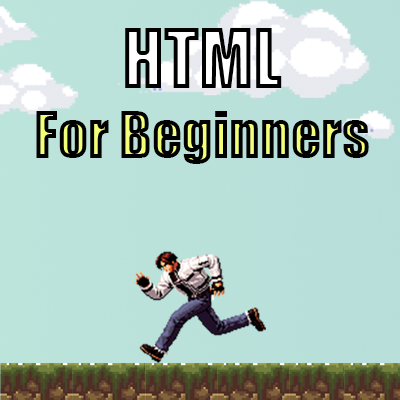
<style>
.page{position:relative;width:400px;height:400px}
.page>*{position:absolute;margin:0}
.t1{font:59px "Impact"}
.t2{font:76px "Impact"}
</style>
<div class="page">
<p class="t1" style="left:36px;top:28px;width:333px;height:136px;text-align:center"><span class="t2">HTML<br></span>For Beginners</p>
</div>
